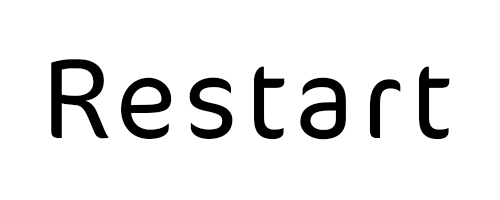
<style>
.page{position:relative;width:500px;height:200px;background:#ffffff}
.page>*{position:absolute;margin:0}
.t1{font:130px "CoconNextArabic-Light";letter-spacing:0.04em;color:#000000}
</style>
<div class="page">
<p class="t1" style="left:51px;top:59px;width:399px;height:81px">Restart</p>
</div>
